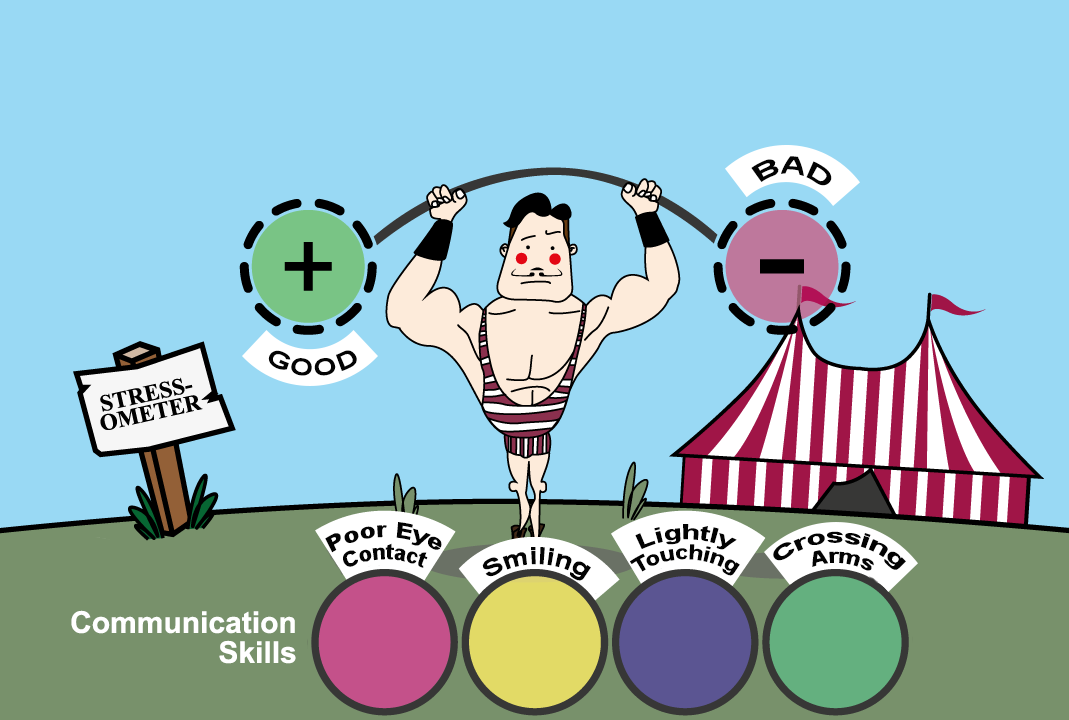
<style>
.page{position:relative;width:1069px;height:720px;background:#99d9f4}
.page>*{position:absolute;margin:0}
.t1{font:24px "Arial-BoldMT";color:#030303}
.t2{font:21.6px/23px "Arial-BoldMT";color:#030303;scale:0.83 1}
.t3{font:20px/20px "Arial-BoldMT";color:#030303}
.t4{font:19px/20px "Arial-BoldMT";color:#030303}
.t5{font:30px/30px "Arial-BoldMT";color:#ffffff}
</style>
<div class="page">
<p class="t1" style="left:751px;top:156px;width:81px;height:30px;rotate:6deg">BAD</p>
<p class="t1" style="left:268px;top:350px;width:89px;height:26px">GOOD</p>
<p class="t2" style="left:325px;top:522px;width:117px;height:46px;text-align:center;rotate:-1deg">Poor Eye<br>Contact</p>
<p class="t3" style="left:630px;top:524px;width:110px;height:52px;text-align:center">Lightly<br>Touching</p>
<p class="t4" style="left:773px;top:531px;width:133px;height:40px;text-align:center;rotate:5deg">Crossing <br>Arms</p>
<p class="t1" style="left:482px;top:547px;width:109px;height:34px">Smiling</p>
<p class="t5" style="left:71px;top:610px;width:225px;height:54px;text-align:right">Communication<br>Skills</p>
</div>
